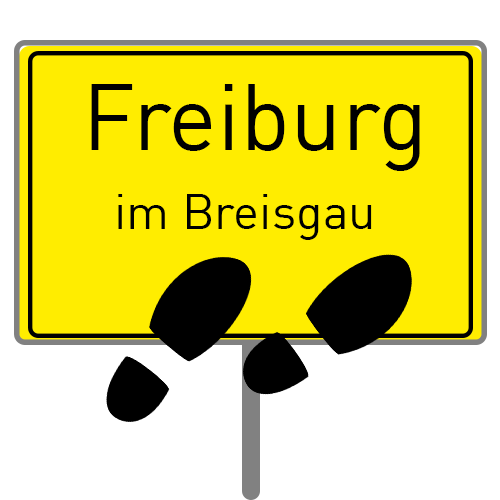
<style>
.page{position:relative;width:500px;height:500px;background:#ffed00}
.page>*{position:absolute;margin:0}
.t1{font:92px "DIN-Regular";color:#000000}
.t2{font:49px "DIN-Regular";color:#000000}
</style>
<div class="page">
<p class="t1" style="left:91px;top:84px;width:329px;height:87px">Freiburg</p>
<p class="t2" style="left:118px;top:194px;width:254px;height:46px">im Breisgau</p>
</div>
